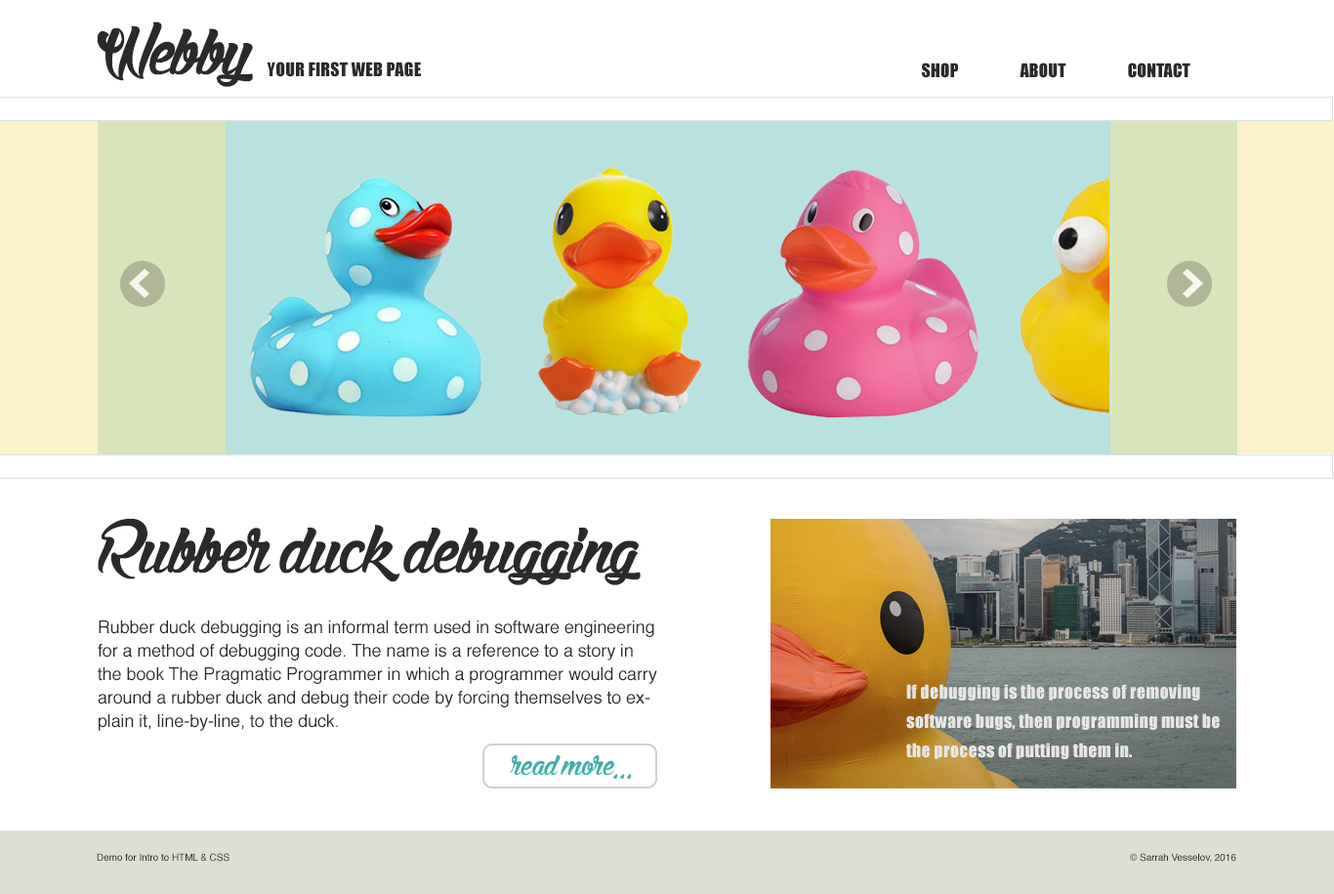
<style>
.page{position:relative;width:1334px;height:894px;background:#ffffff}
.page>*{position:absolute;margin:0}
.t1{font:112.3px "StinkontheDeath";letter-spacing:-0.005em;color:#2a2a2a}
.t2{font:17.6px "Impact";letter-spacing:0.01em;color:#2a2a2a}
.t3{font:17.6px "Impact";color:#2a2a2a;text-transform:uppercase}
.t4{font:111.4px "StinkontheDeath";letter-spacing:-0.005em;color:#2a2a2a}
.t5{font:17.6px/23.4px "Helvetica";letter-spacing:-0.005em;color:#2a2a2a}
.t6{font:17.6px/29.3px "Impact";letter-spacing:0.01em;color:#e7e6e6}
.t7{font:48.8px "StinkontheDeath";letter-spacing:-0.005em;color:#3fb0ac}
.t8{font:9.8px "Helvetica";letter-spacing:-0.005em;color:#2a2a2a}
</style>
<div class="page">
<p class="t1" style="left:97px;top:21px;width:156px;height:66px">Webby</p>
<p class="t2" style="left:267px;top:62px;width:154px;height:15px">YOUR FIRST WEB PAGE</p>
<p class="t3" style="left:922px;top:63px;width:36px;height:15px">shop</p>
<p class="t3" style="left:1020px;top:63px;width:47px;height:15px">about</p>
<p class="t3" style="left:1128px;top:63px;width:63px;height:15px">contact</p>
<p class="t4" style="left:98px;top:519px;width:543px;height:66px">Rubber duck debugging</p>
<p class="t5" style="left:98px;top:620px;width:559px;height:111px">Rubber duck debugging is an informal term used in software engineering for a method of debugging code. The name is a reference to a story in the book The Pragmatic Programmer in which a programmer would carry around a rubber duck and debug their code by forcing themselves to explain it, line-by-line, to the duck.</p>
<p class="t6" style="left:906px;top:684px;width:314px;height:75px">If debugging is the process of removing software bugs, then programming must be the process of putting them in.</p>
<p class="t7" style="left:510px;top:755px;width:122px;height:24px">read more...</p>
<p class="t8" style="left:97px;top:853px;width:133px;height:8px">Demo for Intro to HTML &amp; CSS</p>
<p class="t8" style="left:1130px;top:853px;width:107px;height:9px">© Sarrah Vesselov, 2016</p>
</div>
